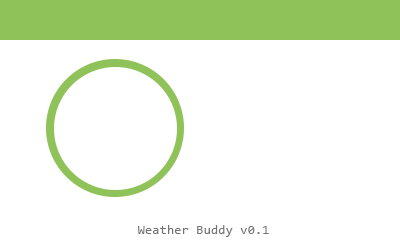
<style>
.page{position:relative;width:400px;height:240px;background:#ffffff}
.page>*{position:absolute;margin:0}
.t1{font:13.3px "Consolas";color:#737373}
</style>
<div class="page">
<p class="t1" style="left:138px;top:225px;width:131px;height:12px">Weather Buddy v0.1</p>
</div>
